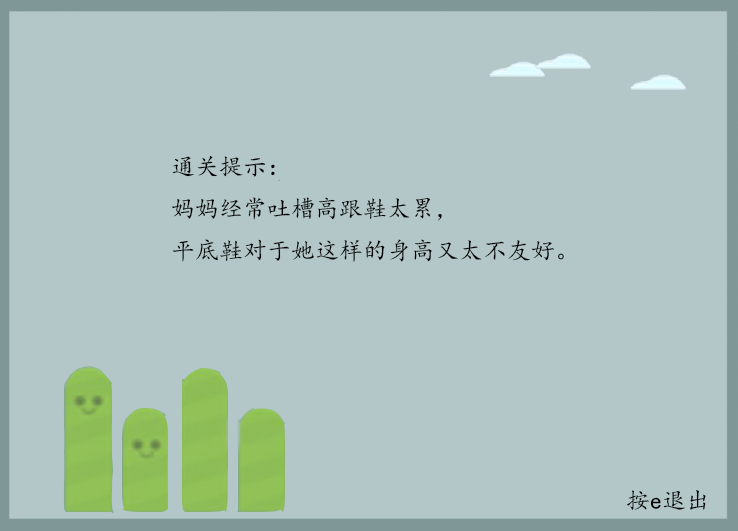
<style>
.page{position:relative;width:738px;height:531px;background:#b3c7c8}
.page>*{position:absolute;margin:0}
.t1{font:24px "KaiTi";color:#000000}
</style>
<div class="page">
<p class="t1" style="left:172px;top:156px;width:392px;height:106px">通关提示：<br>妈妈经常吐槽高跟鞋太累，<br>平底鞋对于她这样的身高又太不友好。</p>
<p class="t1" style="left:627px;top:490px;width:79px;height:20px">按e退出</p>
</div>
